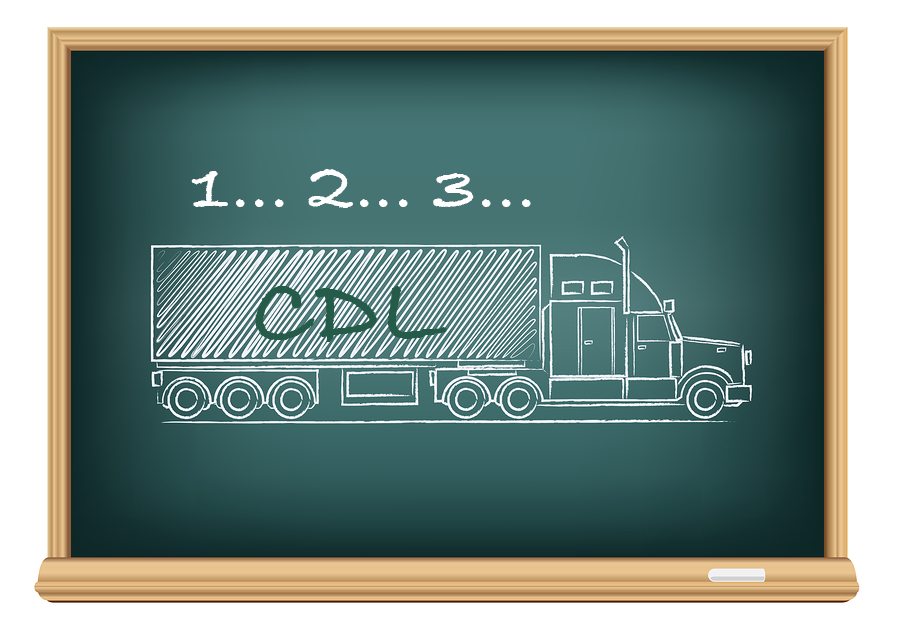
<style>
.page{position:relative;width:900px;height:636px;background:#ffffff}
.page>*{position:absolute;margin:0}
.t1{font:72px "BradleyHandITCTT-Bold";letter-spacing:0.01em;color:#ffffff}
.t2{font:100px "BradleyHandITCTT-Bold";letter-spacing:0.01em;color:#255c49}
</style>
<div class="page">
<p class="t1" style="left:191px;top:169px;width:340px;height:39px">1... 2... 3...</p>
<p class="t2" style="left:255px;top:286px;width:192px;height:56px">CDL</p>
</div>
